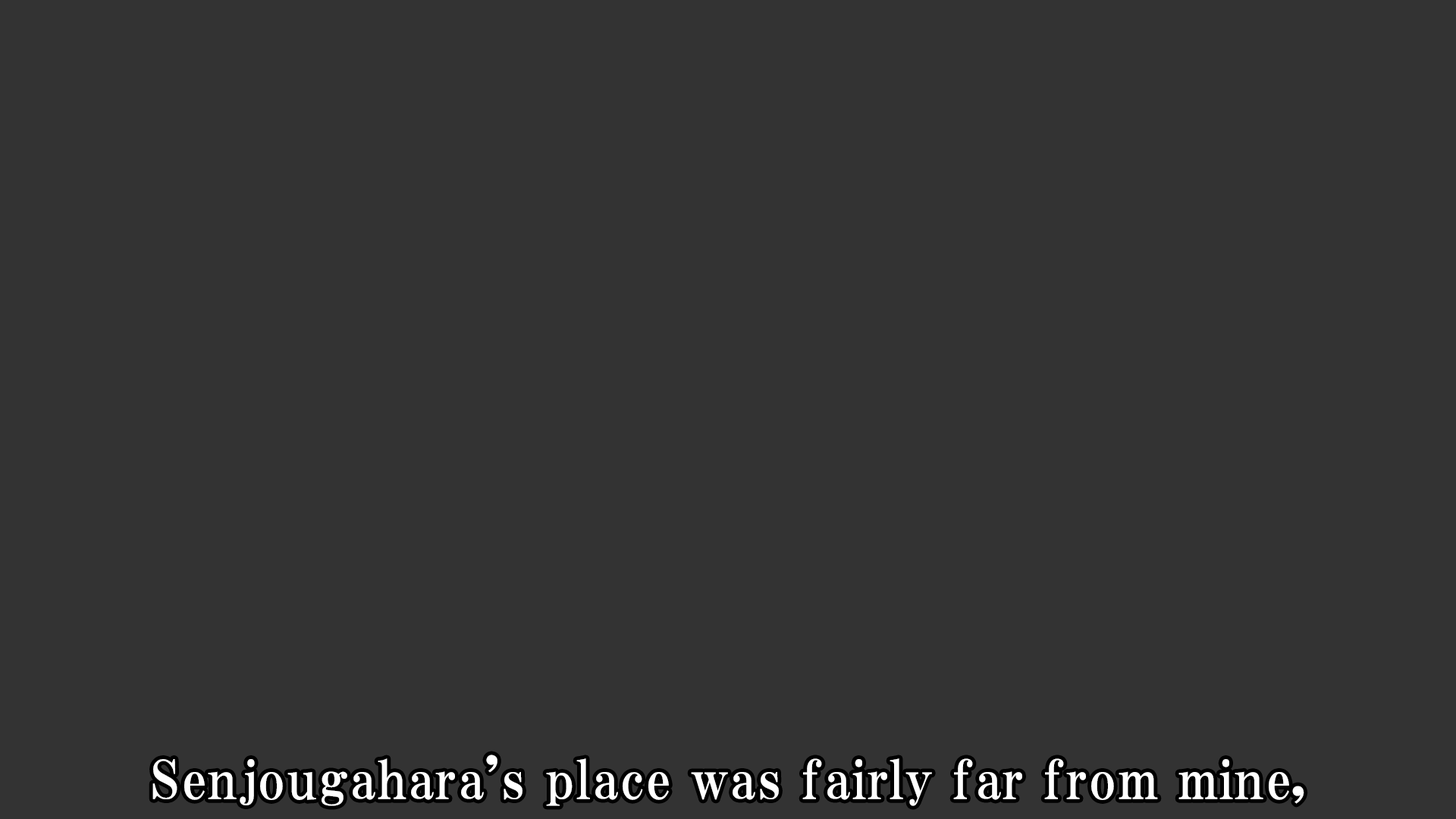
<style>
.page{position:relative;width:1456px;height:819px;background:#333333}
.page>*{position:absolute;margin:0}
.t1{font:53.1px "HGPMinchoE";letter-spacing:0.025em;color:#ffffff}
</style>
<div class="page">
<p class="t1" style="left:152px;top:755px;width:1152px;height:51px">Senjougahara's place was fairly far from mine,</p>
</div>
